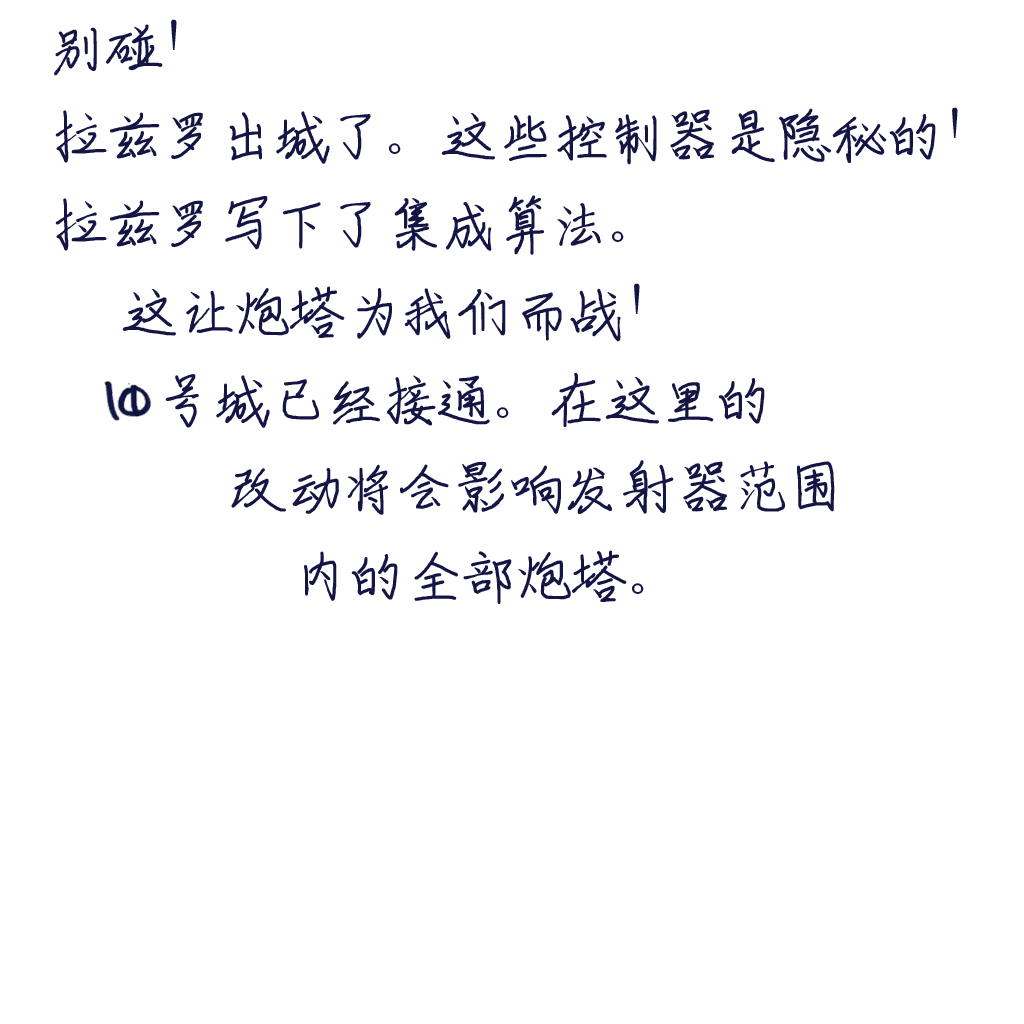
<style>
.page{position:relative;width:1024px;height:1024px;background:#ffffff}
.page>*{position:absolute;margin:0}
.t1{font:62px/88px "ShouShuti";letter-spacing:-0.1em;color:#151545}
</style>
<div class="page">
<p class="t1" style="left:54px;top:19px;width:904px;height:585px">别碰！<br>拉兹罗出城了。这些控制器是隐秘的！<br>拉兹罗写下了集成算法。<br>  这让炮塔为我们而战！<br>   号城已经接通。在这里的<br>     改动将会影响发射器范围<br>         内的全部炮塔。</p>
</div>
